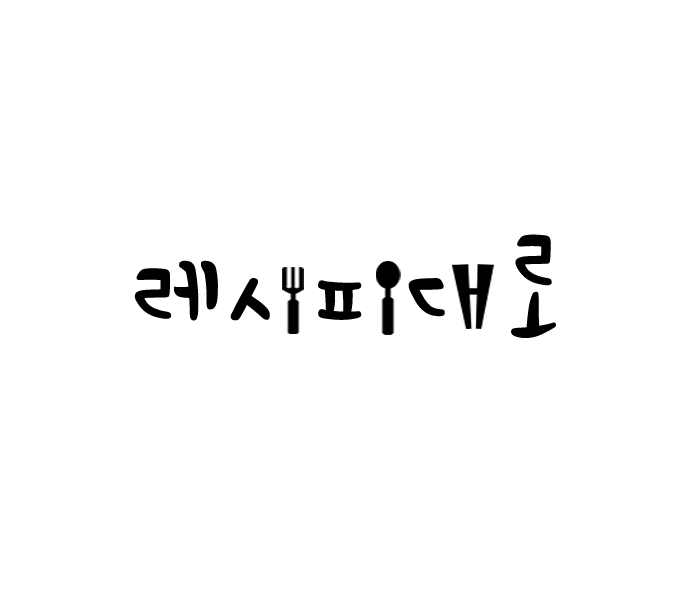
<style>
.page{position:relative;width:700px;height:600px;background:#ffffff}
.page>*{position:absolute;margin:0}
.t1{font:160px "TTSigolbapsangR";color:#000000}
</style>
<div class="page">
<p class="t1" style="left:134px;top:234px;width:422px;height:104px">레시피대로</p>
</div>
